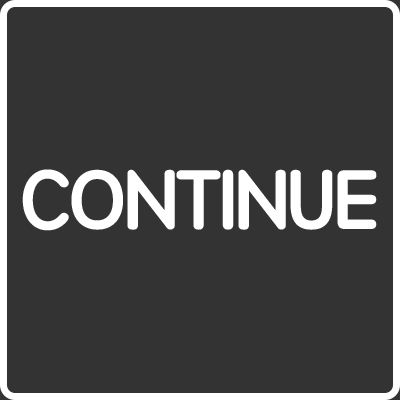
<style>
.page{position:relative;width:400px;height:400px;background:#333333}
.page>*{position:absolute;margin:0}
.t1{font:80px "TTAppgulimR";letter-spacing:-0.05em;color:#ffffff}
</style>
<div class="page">
<p class="t1" style="left:22px;top:169px;width:355px;height:62px">CONTINUE</p>
</div>
